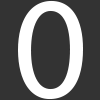
<style>
.page{position:relative;width:100px;height:100px;background:#333333}
.page>*{position:absolute;margin:0}
.t1{font:148px "MyriadPro-Regular";color:#ffffff}
</style>
<div class="page">
<p class="t1" style="left:18px;top:0px;width:65px;height:100px">0</p>
</div>
